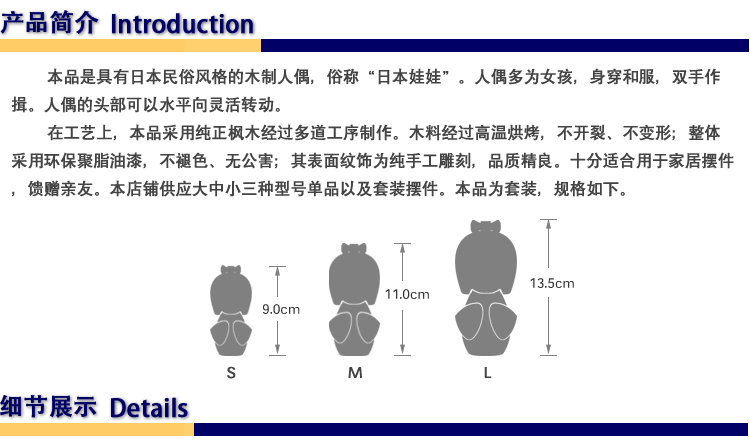
<style>
.page{position:relative;width:750px;height:448px;background:#ffffff}
.page>*{position:absolute;margin:0}
.t1{font:24px "AdobeHeitiStd-Regular";color:#000066;font-weight:bold}
.t2{font:16px "SIL-Hei-Med-Jian";color:#434343;font-weight:bold}
.t3{font:14.1px "SIL-Hei-Med-Jian";color:#333333}
</style>
<div class="page">
<p class="t1" style="left:0px;top:10px;width:99px;height:24px">产品简介</p>
<p class="t1" style="left:112px;top:13px;width:141px;height:21px">Introduction</p>
<p class="t2" style="left:11px;top:68px;width:723px;height:129px">本品是具有日本民俗风格的木制人偶，俗称“日本娃娃”。人偶多为女孩，身穿和服，双手作揖。人偶的头部可以水平向灵活转动。<br> 在工艺上，本品采用纯正枫木经过多道工序制作。木料经过高温烘烤，不开裂、不变形；整体采用环保聚脂油漆，不褪色、无公害；其表面纹饰为纯手工雕刻，品质精良。十分适合用于家居摆件，馈赠亲友。本店铺供应大中小三种型号单品以及套装摆件。本品为套装，规格如下。</p>
<p class="t3" style="left:530px;top:278px;width:44px;height:10px">13.5cm</p>
<p class="t3" style="left:385px;top:289px;width:44px;height:10px">11.0cm</p>
<p class="t3" style="left:263px;top:304px;width:37px;height:10px">9.0cm</p>
<p class="t2" style="left:227px;top:366px;width:9px;height:13px">S</p>
<p class="t2" style="left:348px;top:367px;width:14px;height:11px">M</p>
<p class="t2" style="left:484px;top:367px;width:8px;height:11px">L</p>
<p class="t1" style="left:0px;top:395px;width:97px;height:23px">细节展示</p>
<p class="t1" style="left:111px;top:397px;width:77px;height:21px">Details</p>
</div>
